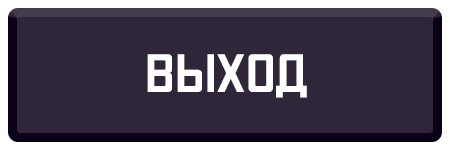
<style>
.page{position:relative;width:450px;height:150px;background:#2f2739}
.page>*{position:absolute;margin:0}
.t1{font:54px "mr_ApexMk3-Medium";color:#ffffff}
</style>
<div class="page">
<p class="t1" style="left:147px;top:54px;width:160px;height:44px">Выход</p>
</div>
